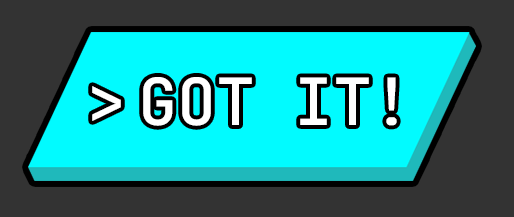
<style>
.page{position:relative;width:514px;height:217px;background:#333333}
.page>*{position:absolute;margin:0}
.t1{font:65px "JetBrainsMonoRoman-Medium";color:#ffffff}
</style>
<div class="page">
<p class="t1" style="left:92px;top:77px;width:305px;height:49px">GOT IT!</p>
</div>
